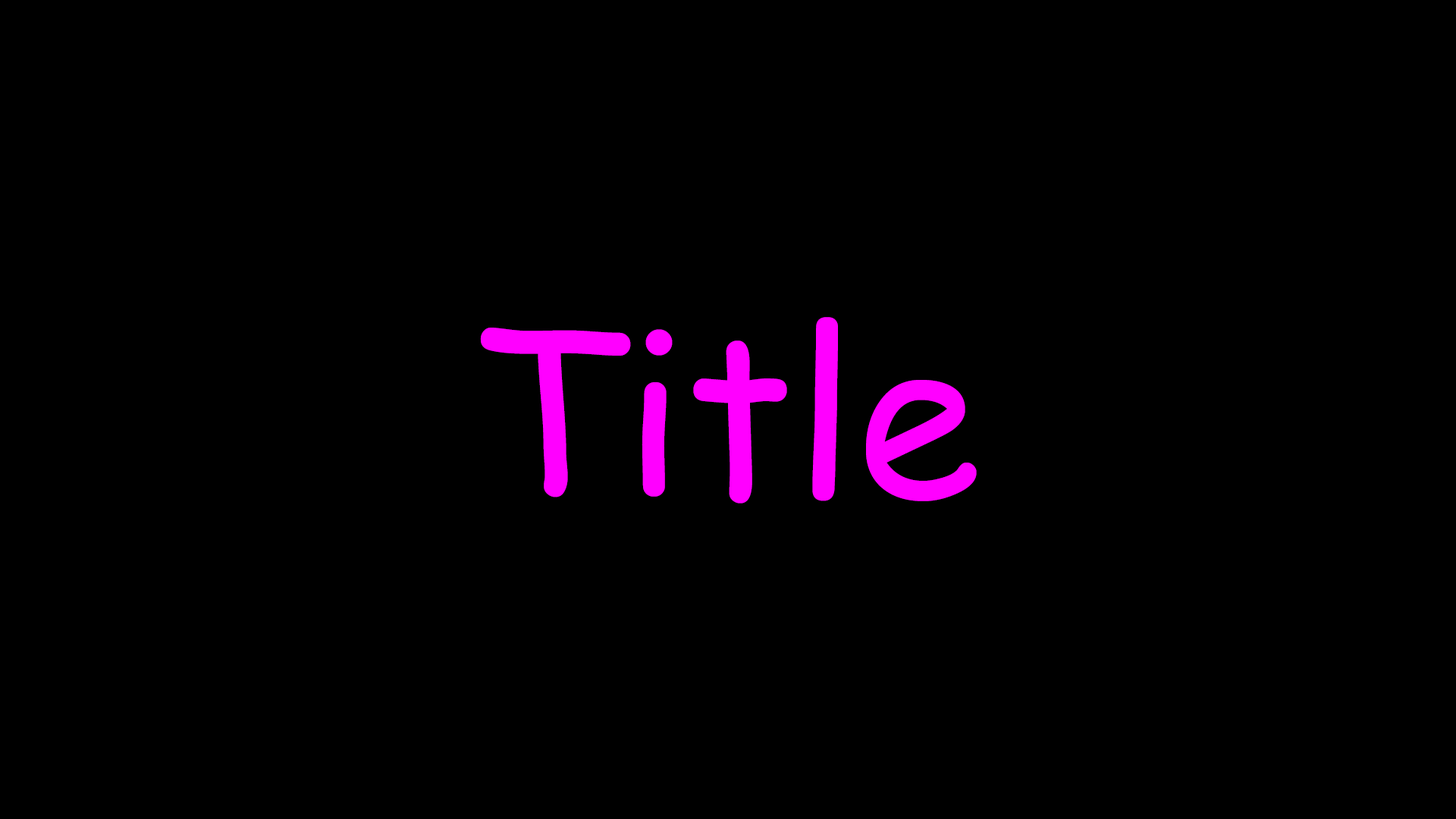
<style>
.page{position:relative;width:1456px;height:819px;background:#000000}
.page>*{position:absolute;margin:0}
.t1{font:227.5px "ComicSansMS";color:#ff00ff}
</style>
<div class="page">
<p class="t1" style="left:480px;top:317px;width:497px;height:187px">Title</p>
</div>
